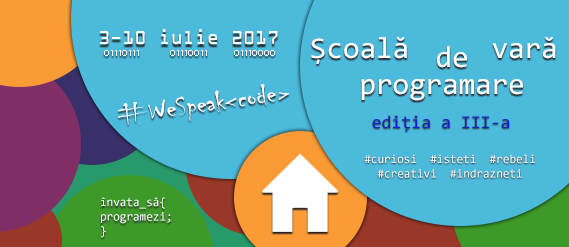
<style>
.page{position:relative;width:569px;height:247px;background:#4cbadb}
.page>*{position:absolute;margin:0}
.t1{font:20px "OCRAExtended";color:#ffffff}
.t2{font:30px "Consolas";color:#ffffff}
.t3{font:10px "04b03";color:#ffffff}
.t4{font:30px "Chiller-Regular";color:#ffffff}
.t5{font:18px "Consolas";color:#171fc6}
.t6{font:12px "Consolas";color:#ffffff}
</style>
<div class="page">
<p class="t1" style="left:100px;top:29px;width:178px;height:15px">3-10 iulie 2017</p>
<p class="t2" style="left:311px;top:37px;width:245px;height:64px;text-align:center">Școală     vară <br>programare</p>
<p class="t3" style="left:104px;top:50px;width:35px;height:6px">01110111</p>
<p class="t3" style="left:170px;top:50px;width:37px;height:6px">01110011</p>
<p class="t3" style="left:234px;top:50px;width:41px;height:6px">01110000</p>
<p class="t2" style="left:437px;top:46px;width:30px;height:22px">de</p>
<p class="t4" style="left:118px;top:84px;width:171px;height:41px;rotate:-8deg">#WeSpeak&lt;code&gt;</p>
<p class="t5" style="left:372px;top:115px;width:137px;height:17px">ediția a III-a</p>
<p class="t6" style="left:364px;top:154px;width:171px;height:24px;text-align:center">#curiosi  #isteti  #rebeli<br>#creativi  #indrazneti</p>
<p class="t6" style="left:101px;top:197px;width:70px;height:41px">învata_să{<br>programezi;<br>}</p>
</div>
